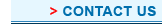
<style>
.page{position:relative;width:162px;height:24px;background:#e6f7ff}
.page>*{position:absolute;margin:0}
.t1{font:14px "Arial-BoldMT";letter-spacing:0.025em;color:#006fad}
.t2{font:14px "Arial-BoldMT";letter-spacing:0.025em;color:#ff0000}
</style>
<div class="page">
<p class="t1" style="left:50px;top:6px;width:106px;height:10px"><span class="t2">&gt; </span>CONTACT US</p>
</div>
